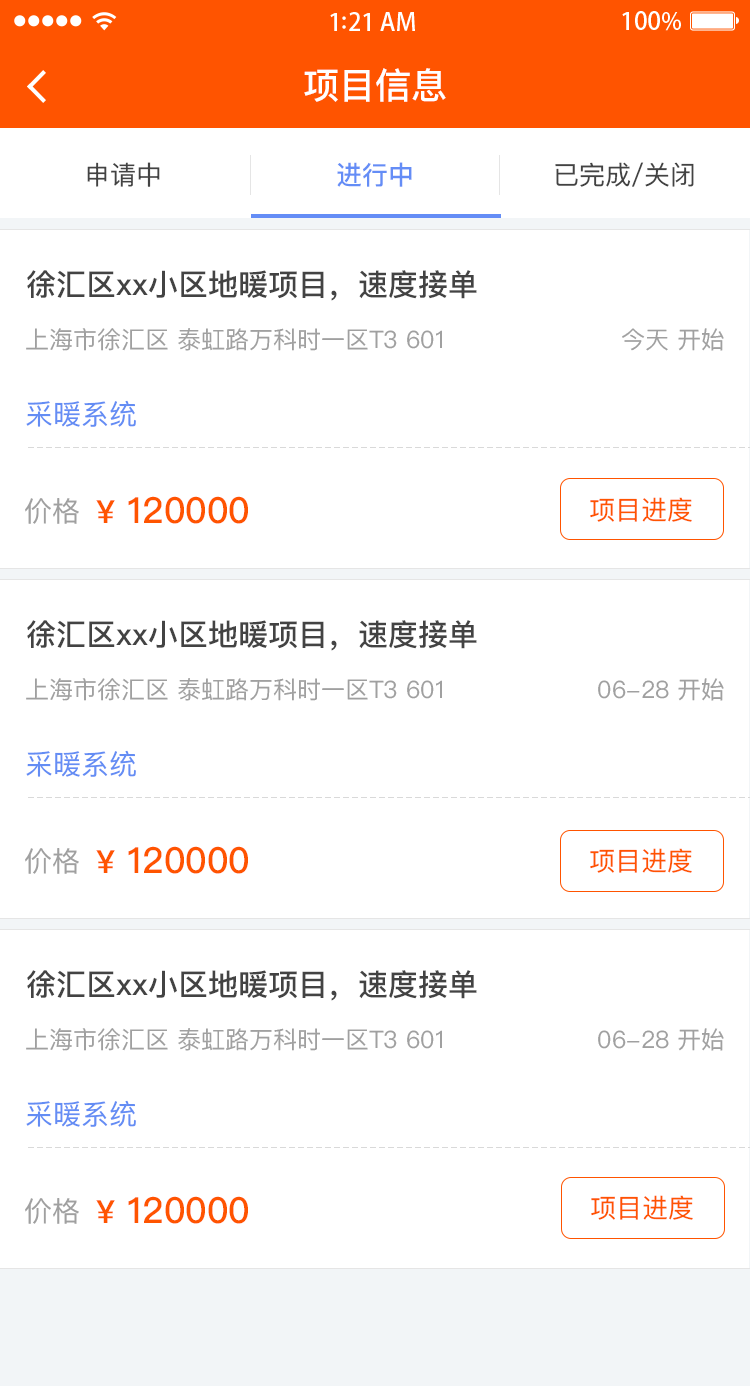
<style>
.page{position:relative;width:750px;height:1386px;background:#ffffff}
.page>*{position:absolute;margin:0}
.t1{font:36px "PingFangSC-Medium";color:#ffffff}
.t2{font:26px "PingFangSC-Regular";color:#434343}
.t3{font:26px "PingFangSC-Medium";color:#648df6}
.t4{font:30px "PingFangSC-Medium";color:#434343}
.t5{font:24px "PingFangSC-Regular";color:#a0a0a0}
.t6{font:28px "PingFangSC-Regular";color:#648df4}
.t7{font:36px "PingFangSC-Medium";color:#ff5400}
.t8{font:32px "PingFangSC-Medium";color:#ff5400}
.t9{font:26px "PingFangSC-Regular";color:#ff5400}
.t10{font:28px "PingFangSC-Regular";color:#a0a0a0}
</style>
<div class="page">
<p class="t1" style="left:304px;top:68px;width:142px;height:34px">项目信息</p>
<p class="t2" style="left:87px;top:162px;width:73px;height:25px">申请中</p>
<p class="t3" style="left:337px;top:162px;width:75px;height:25px">进行中</p>
<p class="t2" style="left:555px;top:162px;width:139px;height:25px">已完成/关闭</p>
<p class="t4" style="left:27px;top:270px;width:450px;height:31px">徐汇区xx小区地暖项目，速度接单</p>
<p class="t5" style="left:26px;top:328px;width:416px;height:23px">上海市徐汇区 泰虹路万科时一区T3 601</p>
<p class="t5" style="left:622px;top:328px;width:102px;height:23px">今天 开始</p>
<p class="t6" style="left:26px;top:400px;width:110px;height:27px">采暖系统</p>
<p class="t7" style="left:96px;top:496px;width:152px;height:28px"><span class="t8">¥</span> 120000</p>
<p class="t9" style="left:590px;top:497px;width:102px;height:25px">项目进度</p>
<p class="t10" style="left:25px;top:498px;width:54px;height:26px">价格</p>
<p class="t4" style="left:27px;top:620px;width:450px;height:31px">徐汇区xx小区地暖项目，速度接单</p>
<p class="t5" style="left:26px;top:678px;width:416px;height:23px">上海市徐汇区 泰虹路万科时一区T3 601</p>
<p class="t5" style="left:598px;top:678px;width:126px;height:23px">06-28 开始</p>
<p class="t6" style="left:26px;top:750px;width:110px;height:27px">采暖系统</p>
<p class="t7" style="left:96px;top:846px;width:152px;height:28px"><span class="t8">¥</span> 120000</p>
<p class="t10" style="left:25px;top:848px;width:54px;height:26px">价格</p>
<p class="t9" style="left:590px;top:848px;width:102px;height:25px">项目进度</p>
<p class="t4" style="left:27px;top:970px;width:450px;height:31px">徐汇区xx小区地暖项目，速度接单</p>
<p class="t5" style="left:26px;top:1028px;width:416px;height:23px">上海市徐汇区 泰虹路万科时一区T3 601</p>
<p class="t5" style="left:598px;top:1028px;width:126px;height:23px">06-28 开始</p>
<p class="t6" style="left:26px;top:1100px;width:110px;height:27px">采暖系统</p>
<p class="t10" style="left:25px;top:1198px;width:54px;height:26px">价格</p>
<p class="t7" style="left:96px;top:1196px;width:152px;height:28px"><span class="t8">¥</span> 120000</p>
<p class="t9" style="left:591px;top:1195px;width:102px;height:25px">项目进度</p>
</div>
